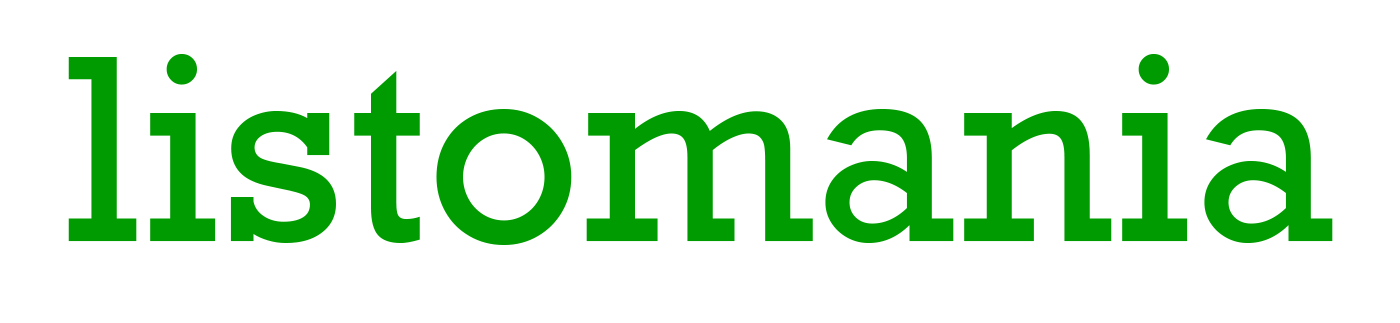
<style>
.page{position:relative;width:1400px;height:323px;background:#ffffff}
.page>*{position:absolute;margin:0}
.t1{font:250px "Rockwell-Regular";color:#009b00}
</style>
<div class="page">
<p class="t1" style="left:68px;top:54px;width:1265px;height:191px">listomania</p>
</div>
